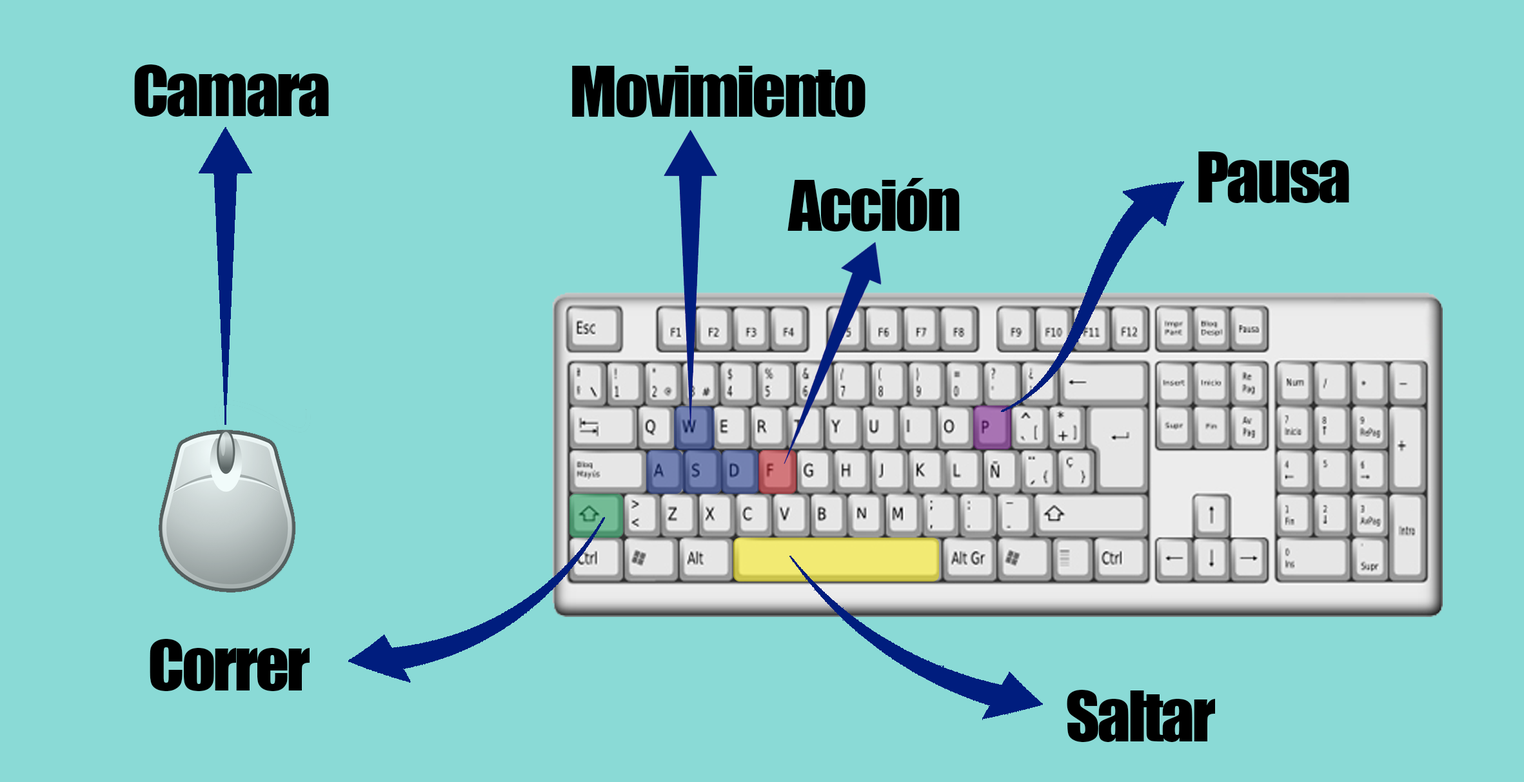
<style>
.page{position:relative;width:1524px;height:782px;background:#8adad6}
.page>*{position:absolute;margin:0}
.t1{font:64.5px "Impact";letter-spacing:-0.04em;color:#000000;scale:1.03 1}
</style>
<div class="page">
<p class="t1" style="left:134px;top:64px;width:195px;height:53px">Camara</p>
<p class="t1" style="left:572px;top:66px;width:294px;height:51px">Movimiento</p>
<p class="t1" style="left:1198px;top:152px;width:151px;height:51px">Pausa</p>
<p class="t1" style="left:788px;top:178px;width:172px;height:54px">Acción</p>
<p class="t1" style="left:150px;top:639px;width:160px;height:52px">Correr</p>
<p class="t1" style="left:1067px;top:690px;width:148px;height:52px">Saltar</p>
</div>
